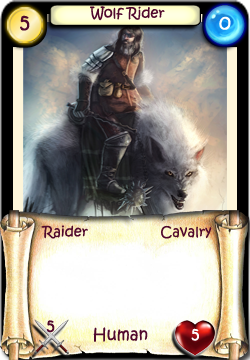
<style>
.page{position:relative;width:250px;height:360px}
.page>*{position:absolute;margin:0}
.t1{font:14px "KristenITC-Regular";color:#51092d}
.t2{font:20px "KristenITC-Regular";color:#51092d}
.t3{font:20px "KristenITC-Regular";color:#ffffff}
.t4{font:16px "KristenITC-Regular";color:#51092d}
.t5{font:16px "KristenITC-Regular";color:#fefefe}
</style>
<div class="page">
<p class="t1" style="left:90px;top:6px;width:75px;height:15px">Wolf Rider</p>
<p class="t2" style="left:20px;top:15px;width:10px;height:16px">5</p>
<p class="t3" style="left:219px;top:16px;width:12px;height:14px">0</p>
<p class="t1" style="left:41px;top:225px;width:47px;height:14px">Raider</p>
<p class="t1" style="left:161px;top:225px;width:51px;height:14px">Cavalry</p>
<p class="t4" style="left:46px;top:320px;width:9px;height:13px">5</p>
<p class="t4" style="left:93px;top:327px;width:55px;height:15px">Human</p>
<p class="t5" style="left:191px;top:328px;width:8px;height:13px">5</p>
</div>
